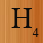
<style>
.page{position:relative;width:43px;height:43px}
.page>*{position:absolute;margin:0}
.t1{font:30px "TimesNewRomanPSMT";color:#0c0c0b}
.t2{font:12px "TimesNewRomanPSMT";color:#0c0c0b}
</style>
<div class="page">
<p class="t1" style="left:11px;top:8px;width:21px;height:20px">H</p>
<p class="t2" style="left:32px;top:28px;width:7px;height:9px">4</p>
</div>
